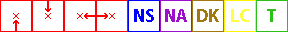
<style>
.page{position:relative;width:288px;height:32px;background:#ffffff}
.page>*{position:absolute;margin:0}
.t1{font:18px "MyriadPro-Bold";color:#0000ff}
.t2{font:18px "MyriadPro-Bold";color:#9b11c9}
.t3{font:18px "MyriadPro-Bold";color:#a0780d}
.t4{font:18px "MyriadPro-Bold";color:#fdff47}
.t5{font:18px "MyriadPro-Bold";color:#2dc019}
</style>
<div class="page">
<p class="t1" style="left:134px;top:9px;width:20px;height:13px">NS</p>
<p class="t2" style="left:165px;top:9px;width:22px;height:13px">NA</p>
<p class="t3" style="left:197px;top:9px;width:22px;height:13px">DK</p>
<p class="t4" style="left:231px;top:9px;width:19px;height:13px">LC</p>
<p class="t5" style="left:267px;top:9px;width:9px;height:13px">T</p>
</div>
